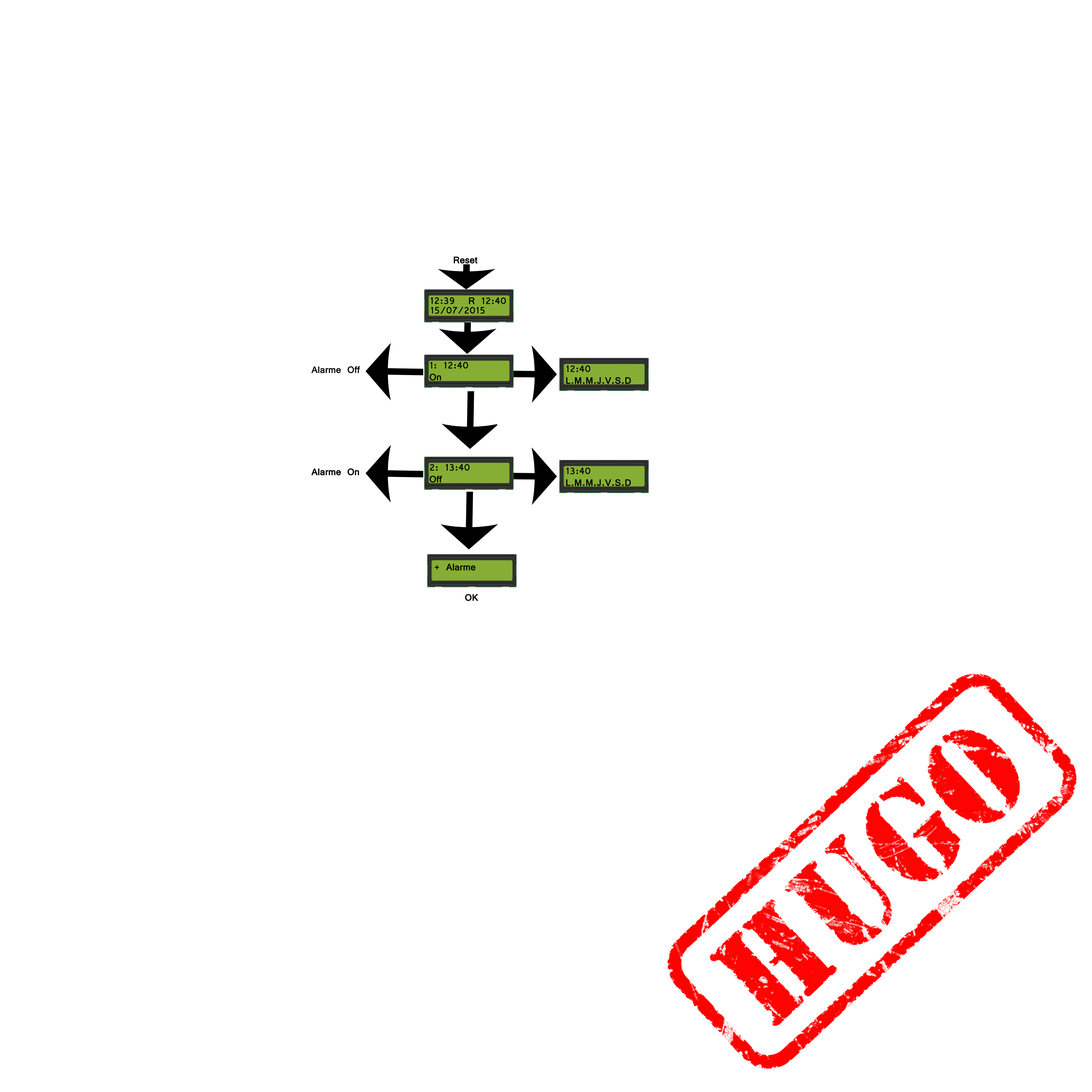
<style>
.page{position:relative;width:1092px;height:1092px;background:#ffffff}
.page>*{position:absolute;margin:0}
.t1{font:9.8px "Vrinda";color:#000000;font-weight:bold}
</style>
<div class="page">
<p class="t1" style="left:454px;top:257px;width:23px;height:6px">Reset</p>
<p class="t1" style="left:454px;top:257px;width:23px;height:6px">Reset</p>
<p class="t1" style="left:431px;top:297px;width:23px;height:7px">12:39</p>
<p class="t1" style="left:469px;top:297px;width:37px;height:7px">R 12:40</p>
<p class="t1" style="left:431px;top:307px;width:54px;height:7px">15/07/2015</p>
<p class="t1" style="left:429px;top:362px;width:39px;height:19px">1: 12:40<br>On</p>
<p class="t1" style="left:566px;top:365px;width:65px;height:19px">12:40<br>L.M.M.J.V.S.D</p>
<p class="t1" style="left:311px;top:366px;width:49px;height:7px">Alarme Off</p>
<p class="t1" style="left:311px;top:468px;width:48px;height:7px">Alarme On</p>
<p class="t1" style="left:311px;top:468px;width:48px;height:7px">Alarme On</p>
<p class="t1" style="left:429px;top:464px;width:41px;height:19px">2: 13:40<br>Off</p>
<p class="t1" style="left:429px;top:464px;width:41px;height:19px">2: 13:40<br>Off</p>
<p class="t1" style="left:566px;top:467px;width:65px;height:19px">13:40<br>L.M.M.J.V.S.D</p>
<p class="t1" style="left:566px;top:467px;width:65px;height:19px">13:40<br>L.M.M.J.V.S.D</p>
<p class="t1" style="left:435px;top:564px;width:41px;height:7px">+ Alarme</p>
<p class="t1" style="left:435px;top:564px;width:41px;height:7px">+ Alarme</p>
<p class="t1" style="left:465px;top:594px;width:13px;height:7px">OK</p>
<p class="t1" style="left:465px;top:594px;width:13px;height:7px">OK</p>
</div>
